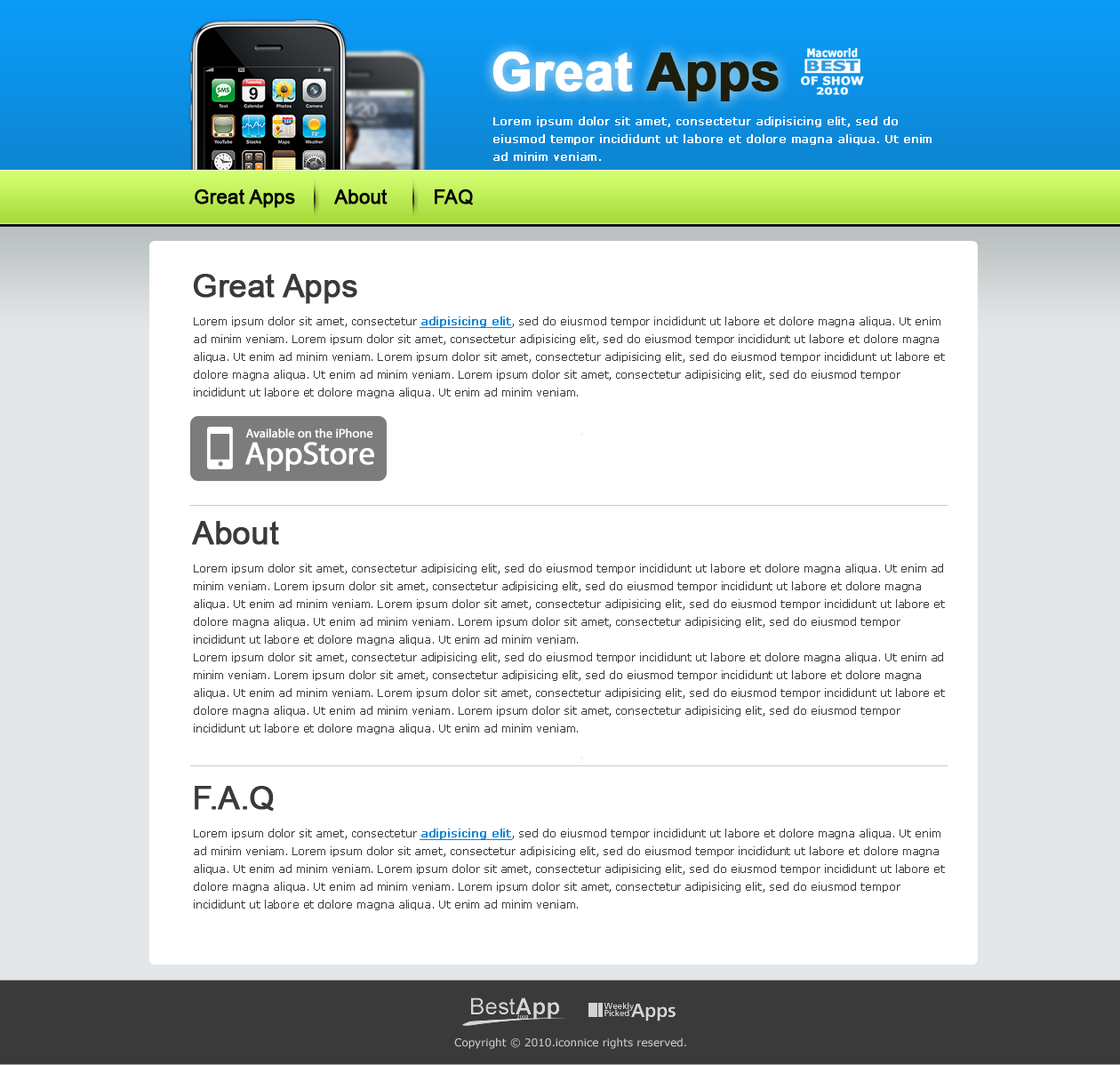
<style>
.page{position:relative;width:1120px;height:1065px;background:#ffffff}
.page>*{position:absolute;margin:0}
.t1{font:52.5px "Arial-BoldMT";letter-spacing:-0.01em;color:#ffffff;font-weight:bold}
.t2{font:52.5px "Arial-BoldMT";letter-spacing:-0.01em;color:#1f1d0b;font-weight:bold}
.t3{font:11.6px/14px "Verdana-Bold";letter-spacing:-0.01em;color:#ffffff;font-weight:bold;scale:0.8 1}
.t4{font:14px/14px "Verdana-Bold";letter-spacing:-0.01em;color:#3299dd;font-weight:bold;scale:1.3 1}
.t5{font:11.6px/14px "Verdana-Bold";letter-spacing:-0.01em;color:#ffffff;font-weight:bold}
.t6{font:9.3px/9.4px "Verdana-Bold";letter-spacing:-0.01em;color:#ffffff;font-weight:bold;scale:1.25 1}
.t7{font:10.7px/17.8px "Verdana";color:#ffffff;font-weight:bold}
.t8{font:19.6px "ArialMT";letter-spacing:-0.01em;color:#000000;font-weight:bold}
.t9{font:32px "ArialMT";letter-spacing:-0.01em;color:#3a3a3a;font-weight:bold}
.t10{font:10.7px/17.8px "Verdana";color:#3a3a3a}
.t11{font:10.7px/17.8px "Verdana";color:#0d89d8;font-weight:bold;text-decoration:underline}
.t12{font:12.4px "MyriadPro-Regular";letter-spacing:-0.005em;color:#ffffff;font-weight:bold}
.t13{font:32.4px "MyriadPro-Regular";letter-spacing:-0.005em;color:#ffffff;font-weight:bold}
.t14{font:10.7px "Verdana";color:#cbcbcb}
</style>
<div class="page">
<p class="t1" style="left:492px;top:52px;width:287px;height:49px">Great <span class="t2">Apps</span></p>
<p class="t3" style="left:801px;top:48px;width:63px;height:47px;text-align:center">Macworld<br><span class="t4">BEST<br></span><span class="t5">OF SHOW<br></span><span class="t6">2010</span></p>
<p class="t7" style="left:493px;top:116px;width:438px;height:45px">Lorem ipsum dolor sit amet, consectetur adipisicing elit, sed do eiusmod tempor incididunt ut labore et dolore magna aliqua. Ut enim ad minim veniam.</p>
<p class="t8" style="left:195px;top:189px;width:278px;height:19px">Great Apps       About        FAQ</p>
<p class="t9" style="left:193px;top:274px;width:164px;height:30px">Great Apps</p>
<p class="t10" style="left:194px;top:316px;width:751px;height:82px">Lorem ipsum dolor sit amet, consectetur <span class="t11">adipisicing elit</span>, sed do eiusmod tempor incididunt ut labore et dolore magna aliqua. Ut enim ad minim veniam. Lorem ipsum dolor sit amet, consectetur adipisicing elit, sed do eiusmod tempor incididunt ut labore et dolore magna aliqua. Ut enim ad minim veniam. Lorem ipsum dolor sit amet, consectetur adipisicing elit, sed do eiusmod tempor incididunt ut labore et dolore magna aliqua. Ut enim ad minim veniam. Lorem ipsum dolor sit amet, consectetur adipisicing elit, sed do eiusmod tempor incididunt ut labore et dolore magna aliqua. Ut enim ad minim veniam.</p>
<p class="t12" style="left:245px;top:428px;width:128px;height:10px">Available on the iPhone</p>
<p class="t13" style="left:245px;top:442px;width:129px;height:29px">AppStore</p>
<p class="t9" style="left:192px;top:521px;width:87px;height:24px">About</p>
<p class="t10" style="left:194px;top:563px;width:751px;height:171px">Lorem ipsum dolor sit amet, consectetur adipisicing elit, sed do eiusmod tempor incididunt ut labore et dolore magna aliqua. Ut enim ad minim veniam. Lorem ipsum dolor sit amet, consectetur adipisicing elit, sed do eiusmod tempor incididunt ut labore et dolore magna aliqua. Ut enim ad minim veniam. Lorem ipsum dolor sit amet, consectetur adipisicing elit, sed do eiusmod tempor incididunt ut labore et dolore magna aliqua. Ut enim ad minim veniam. Lorem ipsum dolor sit amet, consectetur adipisicing elit, sed do eiusmod tempor incididunt ut labore et dolore magna aliqua. Ut enim ad minim veniam.<br>Lorem ipsum dolor sit amet, consectetur adipisicing elit, sed do eiusmod tempor incididunt ut labore et dolore magna aliqua. Ut enim ad minim veniam. Lorem ipsum dolor sit amet, consectetur adipisicing elit, sed do eiusmod tempor incididunt ut labore et dolore magna aliqua. Ut enim ad minim veniam. Lorem ipsum dolor sit amet, consectetur adipisicing elit, sed do eiusmod tempor incididunt ut labore et dolore magna aliqua. Ut enim ad minim veniam. Lorem ipsum dolor sit amet, consectetur adipisicing elit, sed do eiusmod tempor incididunt ut labore et dolore magna aliqua. Ut enim ad minim veniam.</p>
<p class="t9" style="left:195px;top:786px;width:79px;height:25px">F.A.Q</p>
<p class="t10" style="left:194px;top:828px;width:751px;height:82px">Lorem ipsum dolor sit amet, consectetur <span class="t11">adipisicing elit</span>, sed do eiusmod tempor incididunt ut labore et dolore magna aliqua. Ut enim ad minim veniam. Lorem ipsum dolor sit amet, consectetur adipisicing elit, sed do eiusmod tempor incididunt ut labore et dolore magna aliqua. Ut enim ad minim veniam. Lorem ipsum dolor sit amet, consectetur adipisicing elit, sed do eiusmod tempor incididunt ut labore et dolore magna aliqua. Ut enim ad minim veniam. Lorem ipsum dolor sit amet, consectetur adipisicing elit, sed do eiusmod tempor incididunt ut labore et dolore magna aliqua. Ut enim ad minim veniam.</p>
<p class="t14" style="left:454px;top:1037px;width:232px;height:12px">Copyright © 2010.iconnice rights reserved.</p>
</div>
